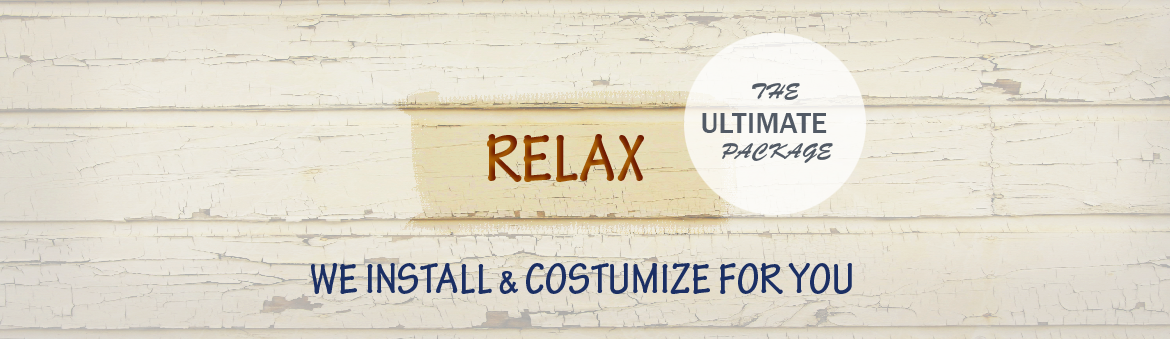
<style>
.page{position:relative;width:1170px;height:339px}
.page>*{position:absolute;margin:0}
.t1{font:21px "BrushScriptStd";letter-spacing:0.01em;color:#525a65;font-variant:small-caps}
.t2{font:30px "FranklinGothic-Medium";letter-spacing:0.01em;color:#525a65;font-variant:small-caps}
.t3{font:72px "TektonPro-BoldCond";letter-spacing:0.01em;font-variant:small-caps}
.t4{font:45px "TektonPro-BoldCond";letter-spacing:0.01em;color:#1b2f64;font-variant:small-caps}
</style>
<div class="page">
<p class="t1" style="left:752px;top:83px;width:48px;height:17px">THE</p>
<p class="t2" style="left:702px;top:113px;width:125px;height:20px">ULTIMATE</p>
<p class="t3" style="left:487px;top:134px;width:157px;height:48px">RELAX</p>
<p class="t1" style="left:722px;top:143px;width:111px;height:20px">PACKAGE</p>
<p class="t4" style="left:311px;top:263px;width:541px;height:31px">WE INSTALL &amp; COSTUMIZE FOR YOU</p>
</div>
